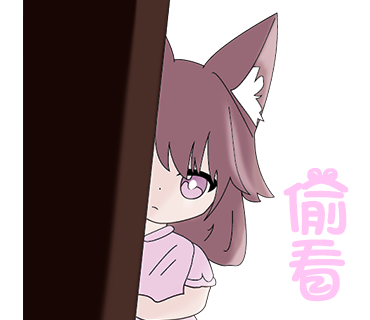
<style>
.page{position:relative;width:370px;height:320px;background:#ffffff}
.page>*{position:absolute;margin:0}
.t1{font:73.4px/64.6px "ARTianniuB5-Bold";color:#ffc6f5;font-weight:bold}
</style>
<div class="page">
<p class="t1" style="left:283px;top:168px;width:66px;height:134px">偷<br>看</p>
</div>
